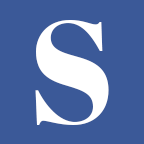
<style>
.page{position:relative;width:144px;height:144px;background:#3b5998}
.page>*{position:absolute;margin:0}
.t1{font:144px "AbrilFatface-Regular";color:#ffffff}
</style>
<div class="page">
<p class="t1" style="left:35px;top:20px;width:74px;height:105px">S</p>
</div>
